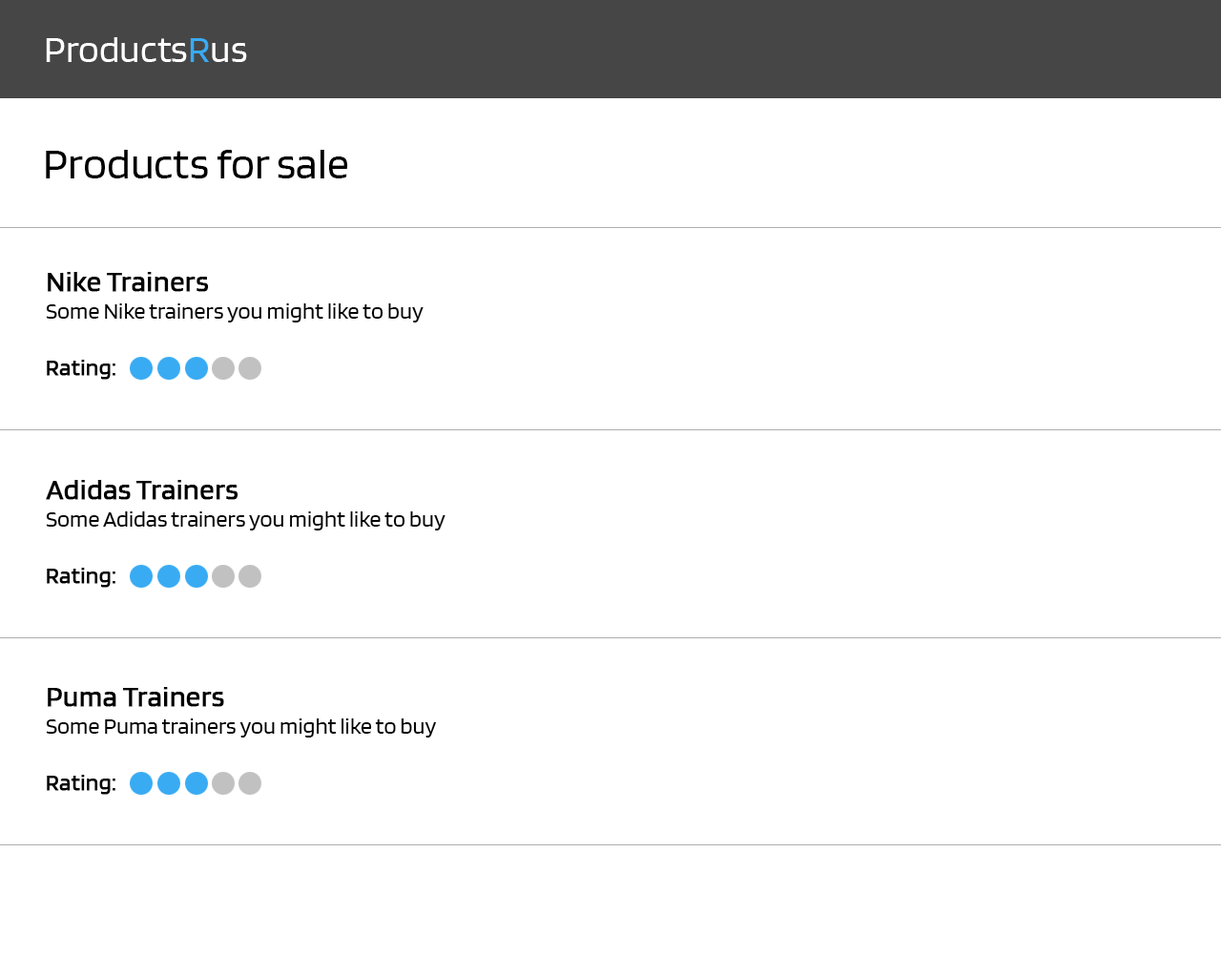
<style>
.page{position:relative;width:1221px;height:977px;background:#ffffff}
.page>*{position:absolute;margin:0}
.t1{font:38.2px "Blinker-Regular";color:#ffffff}
.t2{font:38.2px "Blinker-Regular";color:#39abf3}
.t3{font:43.9px "Blinker-Regular";color:#000000}
.t4{font:22.9px "Blinker-Regular";color:#000000}
.t5{font:28.6px "Blinker-Regular";color:#000000;font-weight:bold}
.t6{font:22.9px "Blinker-Regular";color:#000000;font-weight:bold}
</style>
<div class="page">
<p class="t1" style="left:46px;top:37px;width:201px;height:25px">Products<span class="t2">R</span>us</p>
<p class="t3" style="left:46px;top:150px;width:302px;height:28px">Products for sale</p>
<p class="t4" style="left:46px;top:272px;width:377px;height:50px"><span class="t5">Nike Trainers<br></span>Some Nike trainers you might like to buy</p>
<p class="t6" style="left:47px;top:360px;width:68px;height:20px">Rating:</p>
<p class="t4" style="left:46px;top:480px;width:399px;height:50px"><span class="t5">Adidas Trainers<br></span>Some Adidas trainers you might like to buy</p>
<p class="t6" style="left:47px;top:568px;width:68px;height:20px">Rating:</p>
<p class="t4" style="left:46px;top:687px;width:390px;height:50px"><span class="t5">Puma Trainers<br></span>Some Puma trainers you might like to buy</p>
<p class="t6" style="left:47px;top:774px;width:68px;height:21px">Rating:</p>
</div>
